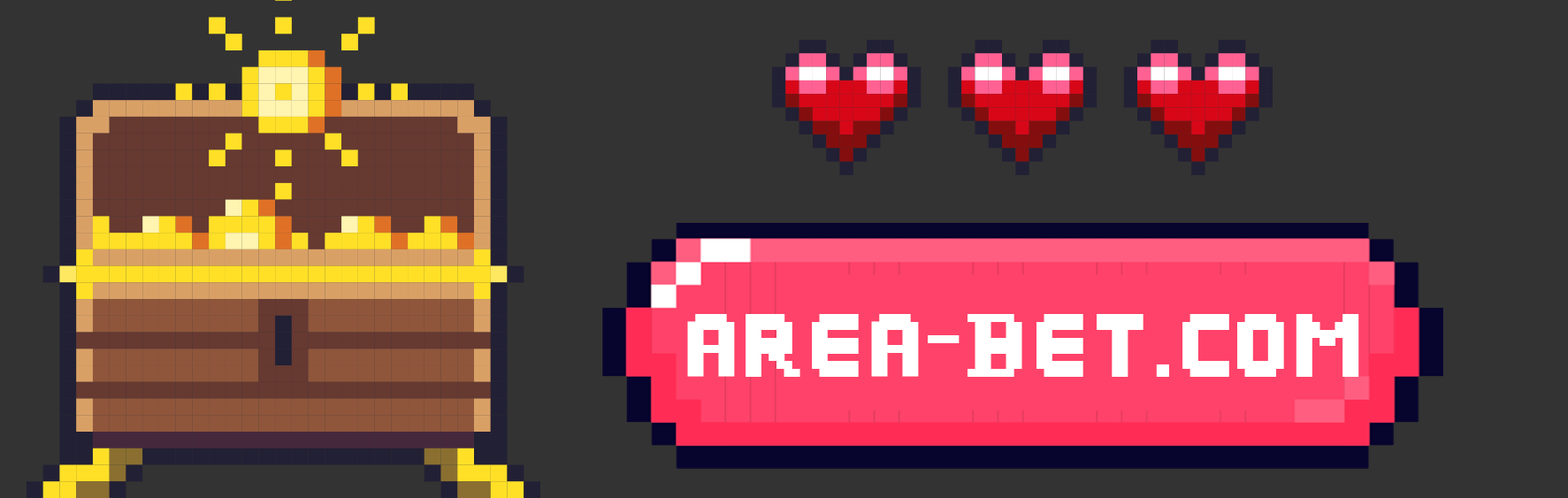
<style>
.page{position:relative;width:1568px;height:498px;background:#333333}
.page>*{position:absolute;margin:0}
.t1{font:88.4px "pixellet-Bold";color:#ffffff}
</style>
<div class="page">
<p class="t1" style="left:687px;top:314px;width:672px;height:63px">AREA-bET.COM</p>
</div>
